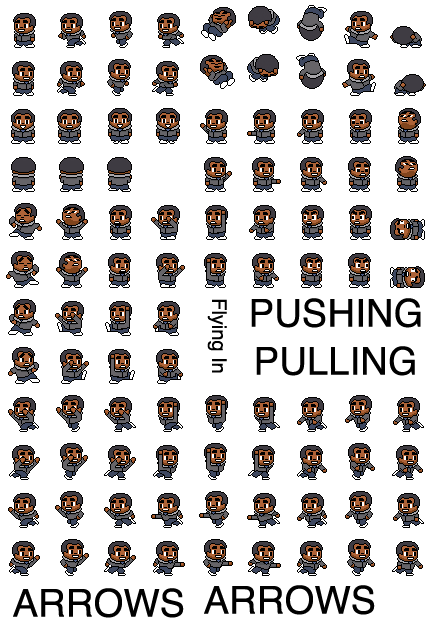
<style>
.page{position:relative;width:432px;height:624px;background:#ffffff}
.page>*{position:absolute;margin:0}
.t1{font:20px "Helvetica";color:#000000}
.t2{font:38.4px "Helvetica";color:#000000}
</style>
<div class="page">
<p class="t1" style="left:207px;top:299px;width:20px;height:74px;rotate:90deg">Flying In</p>
<p class="t2" style="left:251px;top:298px;width:170px;height:30px">PUSHING</p>
<p class="t2" style="left:256px;top:346px;width:159px;height:30px">PULLING</p>
<p class="t2" style="left:13px;top:588px;width:171px;height:30px">ARROWS</p>
<p class="t2" style="left:204px;top:585px;width:171px;height:30px">ARROWS</p>
</div>
